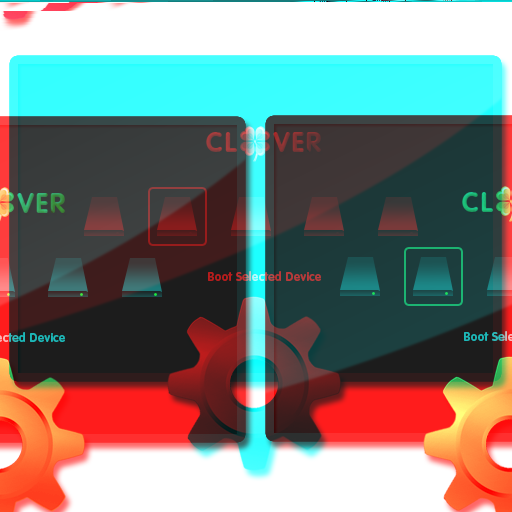
<style>
.page{position:relative;width:512px;height:512px}
.page>*{position:absolute;margin:0}
.t1{font:12px "VAGRounded-Bold";letter-spacing:0.02em}
</style>
<div class="page">
<p class="t1" style="left:208px;top:269px;width:113px;height:10px">Boot Selected Device</p>
</div>
